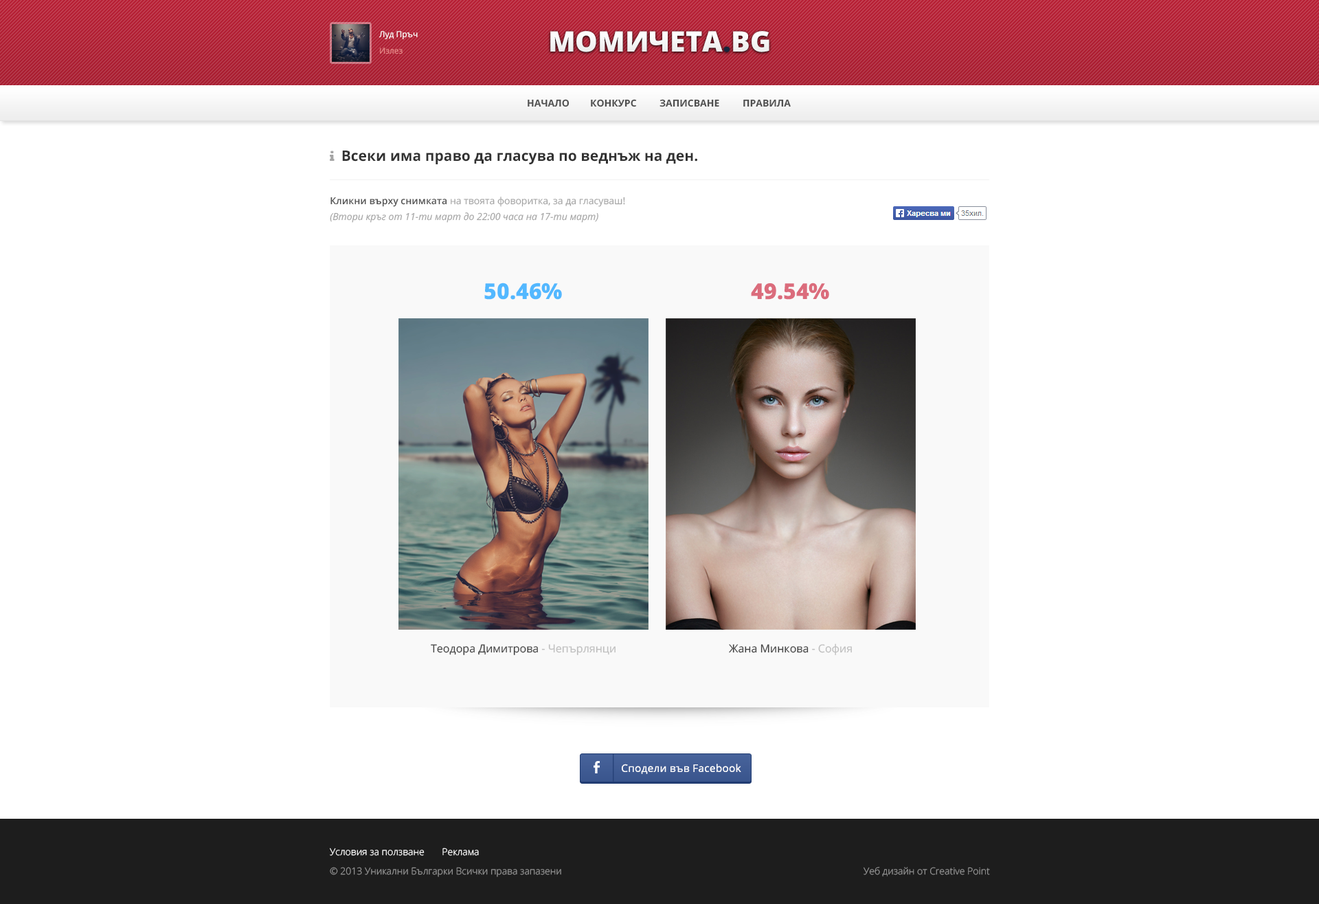
<style>
.page{position:relative;width:1319px;height:904px;background:#ffffff}
.page>*{position:absolute;margin:0}
.t1{font:8.2px "OpenSans";color:#ffffff}
.t2{font:28.2px "OpenSans-Extrabold";color:#ffffff;text-transform:uppercase}
.t3{font:28.2px "OpenSans-Extrabold";color:#1a2840;text-transform:uppercase}
.t4{font:8.2px "OpenSans";color:#e98989}
.t5{font:9.6px "OpenSans-Bold";color:#505050;text-transform:uppercase}
.t6{font:14.4px "OpenSans-Bold";color:#323232}
.t7{font:9.6px/16.3px "OpenSans-Italic";color:#a5a5a5}
.t8{font:9.6px/16.3px "OpenSans-Semibold";color:#525252}
.t9{font:9.6px/16.3px "OpenSans";color:#a5a5a5}
.t10{font:22px "OpenSans-Extrabold";color:#53b8ff}
.t11{font:22px "OpenSans-Extrabold";color:#db6c7c}
.t12{font:11px "OpenSans";color:#444444}
.t13{font:11px "OpenSans";color:#bfbfbf}
.t14{font:10.3px "OpenSans";letter-spacing:0.02em;color:#ffffff}
.t15{font:9.6px "OpenSans-Light";color:#ffffff}
.t16{font:9.6px "OpenSans-Light";color:#959595}
</style>
<div class="page">
<p class="t1" style="left:379px;top:31px;width:39px;height:9px">Луд Пръч</p>
<p class="t2" style="left:550px;top:31px;width:220px;height:21px">Момичета<span class="t3">.</span>bg</p>
<p class="t4" style="left:380px;top:47px;width:23px;height:7px">Излез</p>
<p class="t5" style="left:528px;top:99px;width:42px;height:8px">начало</p>
<p class="t5" style="left:591px;top:99px;width:46px;height:8px">Конкурс</p>
<p class="t5" style="left:660px;top:99px;width:60px;height:8px">Записване</p>
<p class="t5" style="left:744px;top:99px;width:47px;height:8px">правила</p>
<p class="t6" style="left:342px;top:151px;width:356px;height:13px">Всеки има право да гласува по веднъж на ден.</p>
<p class="t7" style="left:330px;top:197px;width:295px;height:26px"><span class="t8">Кликни върху снимката </span><span class="t9">на твоята фоворитка, за да гласуваш!<br></span>(Втори кръг от 11-ти март до 22:00 часа на 17-ти март)</p>
<p class="t10" style="left:484px;top:282px;width:78px;height:18px">50.46%</p>
<p class="t11" style="left:751px;top:282px;width:78px;height:18px">49.54%</p>
<p class="t12" style="left:431px;top:644px;width:185px;height:11px">Teoдора Димитрова <span class="t13">- Чепърлянци</span></p>
<p class="t12" style="left:729px;top:643px;width:123px;height:12px">Жана Минкова <span class="t13">- София</span></p>
<p class="t14" style="left:622px;top:764px;width:120px;height:10px">Сподели във Facebook</p>
<p class="t15" style="left:330px;top:847px;width:149px;height:9px">Условия за ползване       Реклама</p>
<p class="t16" style="left:330px;top:867px;width:231px;height:10px">© 2013 Уникални Българки Всички права запазени</p>
<p class="t16" style="left:864px;top:867px;width:126px;height:9px">Уеб дизайн от Creative Point</p>
</div>
